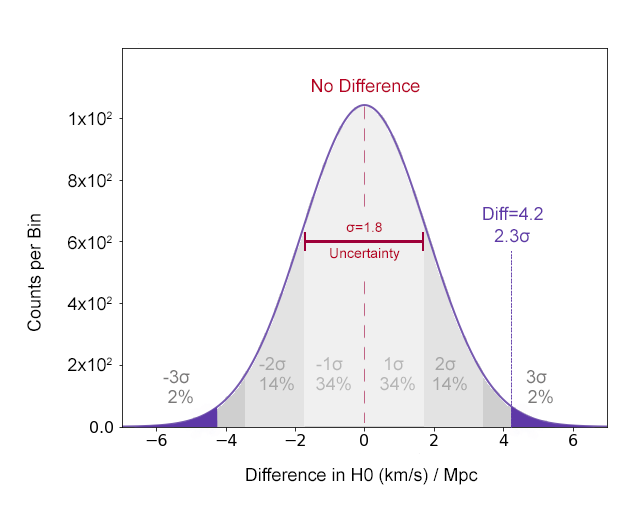
<style>
.page{position:relative;width:628px;height:507px;background:#ffffff}
.page>*{position:absolute;margin:0}
.t1{font:18px "ArialMT";color:#b60022}
.t2{font:18px "ArialMT";color:#000000}
.t3{font:18px "ArialMT";color:#5e38a7}
.t4{font:14px "ArialMT";color:#b60022}
.t5{font:18px "ArialMT";color:#a6a6a6}
.t6{font:18px "ArialMT";color:#b6b6b6}
.t7{font:18px "ArialMT";color:#797878}
</style>
<div class="page">
<p class="t1" style="left:312px;top:78px;width:108px;height:15px">No Difference</p>
<p class="t2" style="left:69px;top:111px;width:43px;height:15px">1x102</p>
<p class="t2" style="left:68px;top:173px;width:44px;height:15px">8x102</p>
<p class="t3" style="left:483px;top:206px;width:60px;height:14px">Diff=4.2</p>
<p class="t2" style="left:27px;top:214px;width:17px;height:117px;rotate:180deg">Counts per Bin</p>
<p class="t4" style="left:346px;top:222px;width:36px;height:10px">σ=1.8</p>
<p class="t3" style="left:494px;top:229px;width:36px;height:14px">2.3σ</p>
<p class="t2" style="left:68px;top:235px;width:44px;height:15px">6x102</p>
<p class="t4" style="left:330px;top:248px;width:70px;height:13px">Uncertainty</p>
<p class="t2" style="left:67px;top:296px;width:45px;height:15px">4x102</p>
<p class="t2" style="left:68px;top:357px;width:44px;height:15px">2x102</p>
<p class="t5" style="left:259px;top:357px;width:27px;height:14px">-2σ</p>
<p class="t6" style="left:316px;top:357px;width:27px;height:14px">-1σ</p>
<p class="t6" style="left:385px;top:357px;width:19px;height:14px">1σ</p>
<p class="t5" style="left:435px;top:357px;width:21px;height:14px">2σ</p>
<p class="t7" style="left:163px;top:370px;width:27px;height:14px">-3σ</p>
<p class="t5" style="left:260px;top:376px;width:34px;height:15px">14%</p>
<p class="t6" style="left:316px;top:376px;width:35px;height:15px">34%</p>
<p class="t6" style="left:380px;top:376px;width:35px;height:15px">34%</p>
<p class="t5" style="left:433px;top:376px;width:34px;height:15px">14%</p>
<p class="t7" style="left:526px;top:370px;width:21px;height:14px">3σ</p>
<p class="t7" style="left:168px;top:389px;width:25px;height:15px">2%</p>
<p class="t7" style="left:528px;top:389px;width:25px;height:15px">2%</p>
<p class="t2" style="left:246px;top:467px;width:232px;height:18px">Difference in H0 (km/s) / Mpc</p>
</div>
